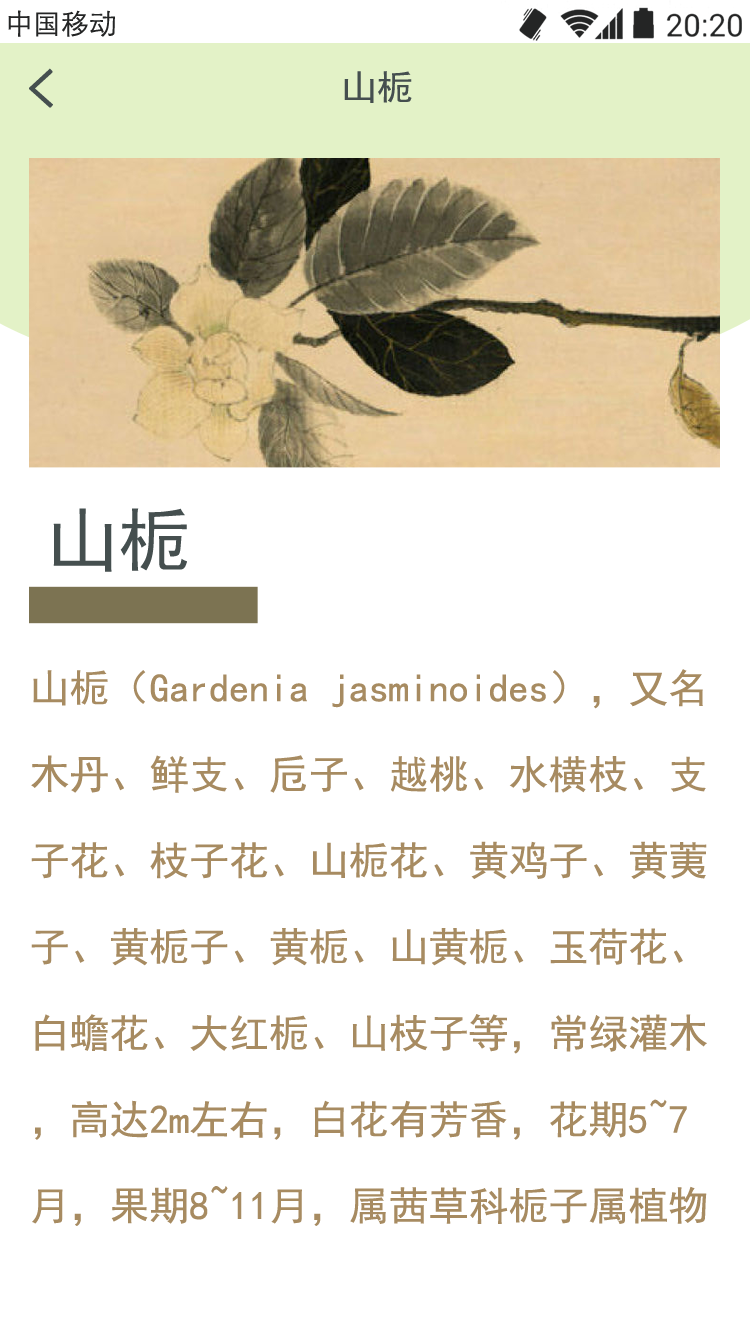
<style>
.page{position:relative;width:750px;height:1334px;background:#ffffff}
.page>*{position:absolute;margin:0}
.t1{font:52.1px "SimHei";color:#454f4f;font-weight:bold}
.t2{font:36px "SimHei";color:#454f4f}
.t3{font:72px "SimHei";color:#454f4f}
.t4{font:39.9px/86.3px "SimHei";color:#a78b61}
</style>
<div class="page">
<p class="t1" style="left:29px;top:68px;width:24px;height:40px">&lt;</p>
<p class="t2" style="left:344px;top:71px;width:68px;height:32px">山栀</p>
<p class="t3" style="left:53px;top:508px;width:134px;height:64px">山栀</p>
<p class="t4" style="left:31px;top:669px;width:676px;height:557px">山栀（Gardenia jasminoides），又名木丹、鲜支、卮子、越桃、水横枝、支子花、枝子花、山栀花、黄鸡子、黄荑子、黄栀子、黄栀、山黄栀、玉荷花、白蟾花、大红栀、山枝子等，常绿灌木，高达2m左右，白花有芳香，花期5~7月，果期8~11月，属茜草科栀子属植物。</p>
</div>
